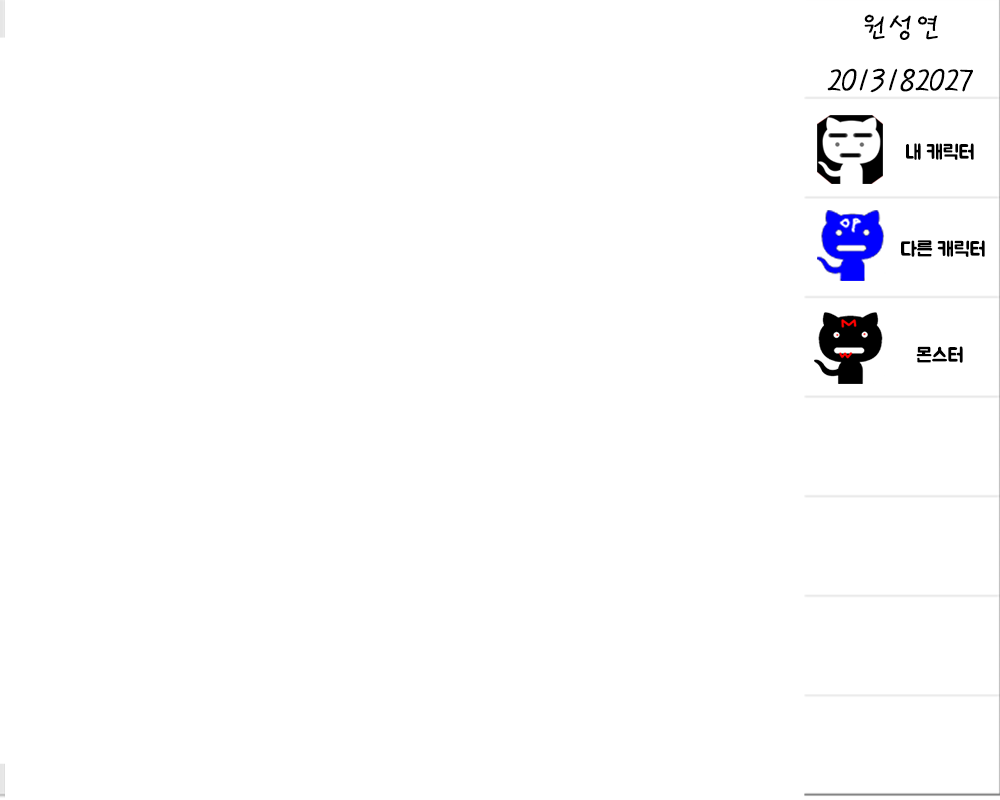
<style>
.page{position:relative;width:1000px;height:800px;background:#ffffff}
.page>*{position:absolute;margin:0}
.t1{font:30px "PyunjiR-HM";color:#000000}
.t2{font:20px "BMJUA";color:#000000}
</style>
<div class="page">
<p class="t1" style="left:827px;top:14px;width:146px;height:79px;text-align:center">원성연<br>2013182027</p>
<p class="t2" style="left:906px;top:143px;width:68px;height:17px">내 캐릭터</p>
<p class="t2" style="left:901px;top:240px;width:84px;height:17px">다른 캐릭터</p>
<p class="t2" style="left:916px;top:346px;width:47px;height:17px">몬스터</p>
</div>
